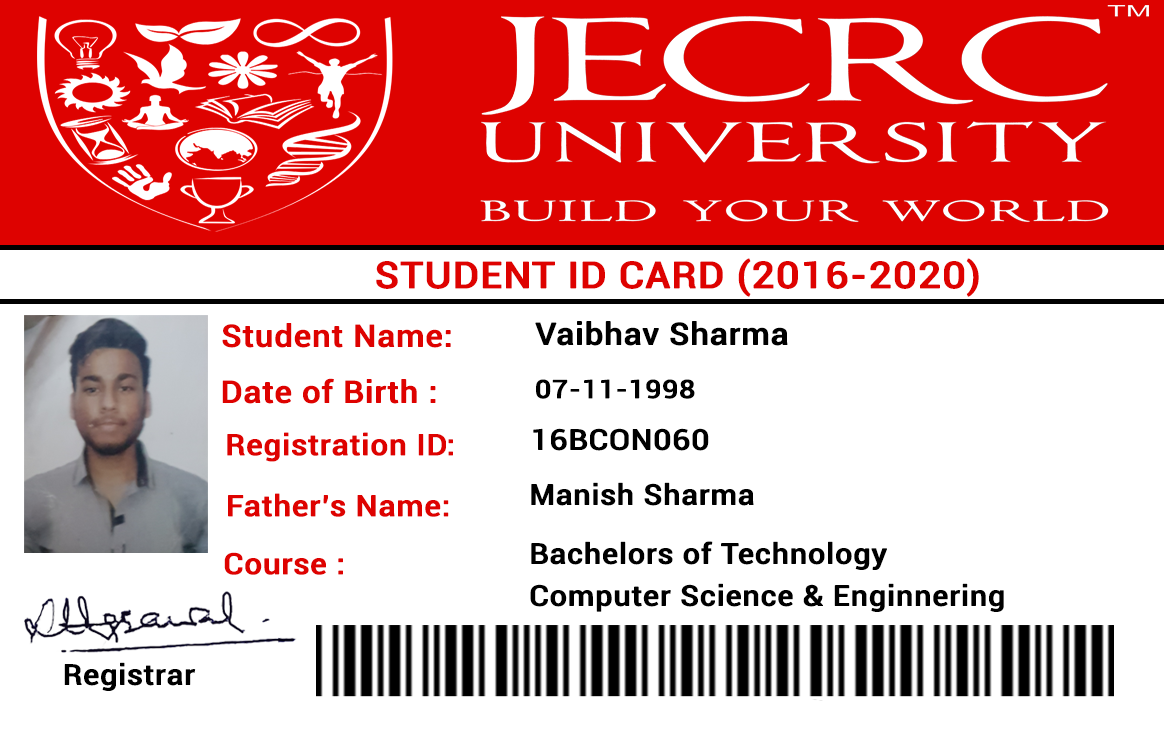
<style>
.page{position:relative;width:1164px;height:732px;background:#ffffff}
.page>*{position:absolute;margin:0}
.t1{font:36.3px "Roboto-Condensed";color:#de0200;font-weight:bold;scale:1.25 1}
.t2{font:30.1px "Roboto-Condensed";color:#de0200;font-weight:bold;scale:1.25 1}
.t3{font:30.1px "Roboto-Condensed";color:#000000;font-weight:bold;scale:1.25 1}
.t4{font:24.9px "Roboto-Condensed";color:#000000;font-weight:bold;scale:1.25 1}
.t5{font:28.7px "Roboto-Condensed";color:#de0200;font-weight:bold;scale:1.25 1}
.t6{font:28px "Roboto-Condensed";color:#000000;font-weight:bold;scale:1.25 1}
</style>
<div class="page">
<p class="t1" style="left:376px;top:258px;width:603px;height:39px">STUDENT ID CARD (2016-2020)</p>
<p class="t2" style="left:222px;top:323px;width:229px;height:25px">Student Name:</p>
<p class="t3" style="left:535px;top:321px;width:253px;height:25px">Vaibhav Sharma</p>
<p class="t2" style="left:222px;top:378px;width:214px;height:26px">Date of Birth :</p>
<p class="t4" style="left:536px;top:379px;width:159px;height:20px">07-11-1998</p>
<p class="t5" style="left:227px;top:432px;width:226px;height:30px">Registration ID:</p>
<p class="t6" style="left:533px;top:428px;width:176px;height:23px">16BCON060</p>
<p class="t6" style="left:531px;top:482px;width:223px;height:24px">Manish Sharma</p>
<p class="t5" style="left:228px;top:493px;width:221px;height:24px">Father’s Name:</p>
<p class="t6" style="left:530px;top:541px;width:474px;height:71px">Bachelors of Technology<br>Computer Science &amp; Enginnering</p>
<p class="t5" style="left:224px;top:552px;width:119px;height:23px">Course :</p>
<p class="t6" style="left:64px;top:662px;width:132px;height:29px">Registrar</p>
</div>
